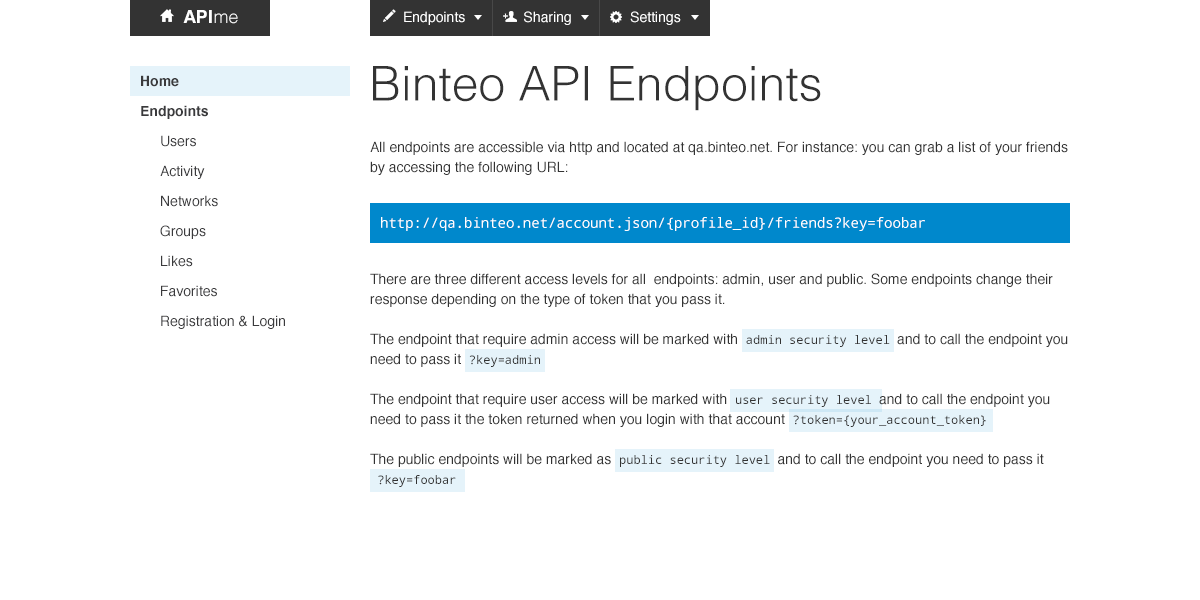
<style>
.page{position:relative;width:1200px;height:600px;background:#ffffff}
.page>*{position:absolute;margin:0}
.t1{font:18px "Helvetica-Bold";color:#ffffff}
.t2{font:18px "Helvetica-Light";color:#ffffff}
.t3{font:14px "Helvetica";color:#ffffff}
.t4{font:14px/30px "Helvetica-Bold";color:#3a3a3c}
.t5{font:48px "Helvetica-Light";color:#333333}
.t6{font:14px/30px "Helvetica";color:#3a3a3c}
.t7{font:14px/20px "Helvetica";color:#333333}
.t8{font:14px "DroidSansMono";color:#ffffff}
.t9{font:12px/20px "DroidSansMono";color:#333333}
</style>
<div class="page">
<p class="t1" style="left:183px;top:10px;width:55px;height:14px">API<span class="t2">me</span></p>
<p class="t3" style="left:404px;top:11px;width:277px;height:14px">Endpoints               Sharing               Settings</p>
<p class="t4" style="left:141px;top:75px;width:67px;height:44px">Home<br>Endpoints</p>
<p class="t5" style="left:373px;top:66px;width:448px;height:45px">Binteo API Endpoints</p>
<p class="t6" style="left:160px;top:135px;width:125px;height:194px">Users<br>Activity<br>Networks<br>Groups<br>Likes<br>Favorites<br>Registration &amp; Login</p>
<p class="t7" style="left:370px;top:141px;width:698px;height:34px">All endpoints are accessible via http and located at qa.binteo.net. For instance: you can grab a list of your friends by accessing the following URL:</p>
<p class="t8" style="left:381px;top:217px;width:544px;height:14px">http://qa.binteo.net/account.json/{profile_id}/friends?key=foobar</p>
<p class="t7" style="left:370px;top:273px;width:698px;height:214px">There are three different access levels for all  endpoints: admin, user and public. Some endpoints change their response depending on the type of token that you pass it.<br><br>The endpoint that require admin access will be marked with  <span class="t9">admin security level </span> and to call the endpoint you need to pass it  <span class="t9">?key=admin<br><br></span>The endpoint that require user access will be marked with  <span class="t9">user security level </span> and to call the endpoint you need to pass it the token returned when you login with that account  <span class="t9">?token={your_account_token}<br><br></span>The public endpoints will be marked as  <span class="t9">public security level </span> and to call the endpoint you need to pass it    <br><span class="t9"> ?key=foobar</span></p>
</div>
